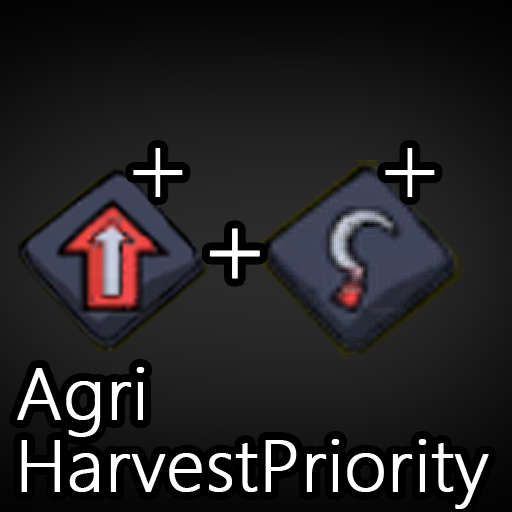
<style>
.page{position:relative;width:512px;height:512px}
.page>*{position:absolute;margin:0}
.t1{font:102.4px "MicrosoftYaHeiLight";color:#ffffff}
.t2{font:102.4px "MicrosoftYaHeiLight";color:#ffffff;font-weight:bold}
.t3{font:68.3px/71.7px "MicrosoftYaHeiLight";color:#ffffff;font-weight:bold}
</style>
<div class="page">
<p class="t1" style="left:133px;top:148px;width:50px;height:49px">+</p>
<p class="t1" style="left:385px;top:148px;width:50px;height:49px">+</p>
<p class="t2" style="left:209px;top:228px;width:51px;height:51px">+</p>
<p class="t3" style="left:17px;top:367px;width:472px;height:142px">Agri<br>HarvestPriority</p>
</div>
